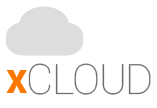
<style>
.page{position:relative;width:157px;height:108px;background:#ffffff}
.page>*{position:absolute;margin:0}
.t1{font:42px "Roboto-Thin";letter-spacing:-0.035em;color:#6f6e6e}
.t2{font:42px "Roboto-Bold";letter-spacing:-0.035em;color:#fd7800}
</style>
<div class="page">
<p class="t1" style="left:28px;top:63px;width:123px;height:32px">CLOUD</p>
<p class="t2" style="left:6px;top:70px;width:21px;height:23px">x</p>
</div>
